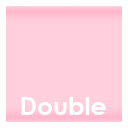
<style>
.page{position:relative;width:128px;height:128px;background:#ffcfdd}
.page>*{position:absolute;margin:0}
.t1{font:25px "CenturyGothic-Bold";color:#ffffff}
</style>
<div class="page">
<p class="t1" style="left:21px;top:97px;width:85px;height:18px">Double</p>
</div>
